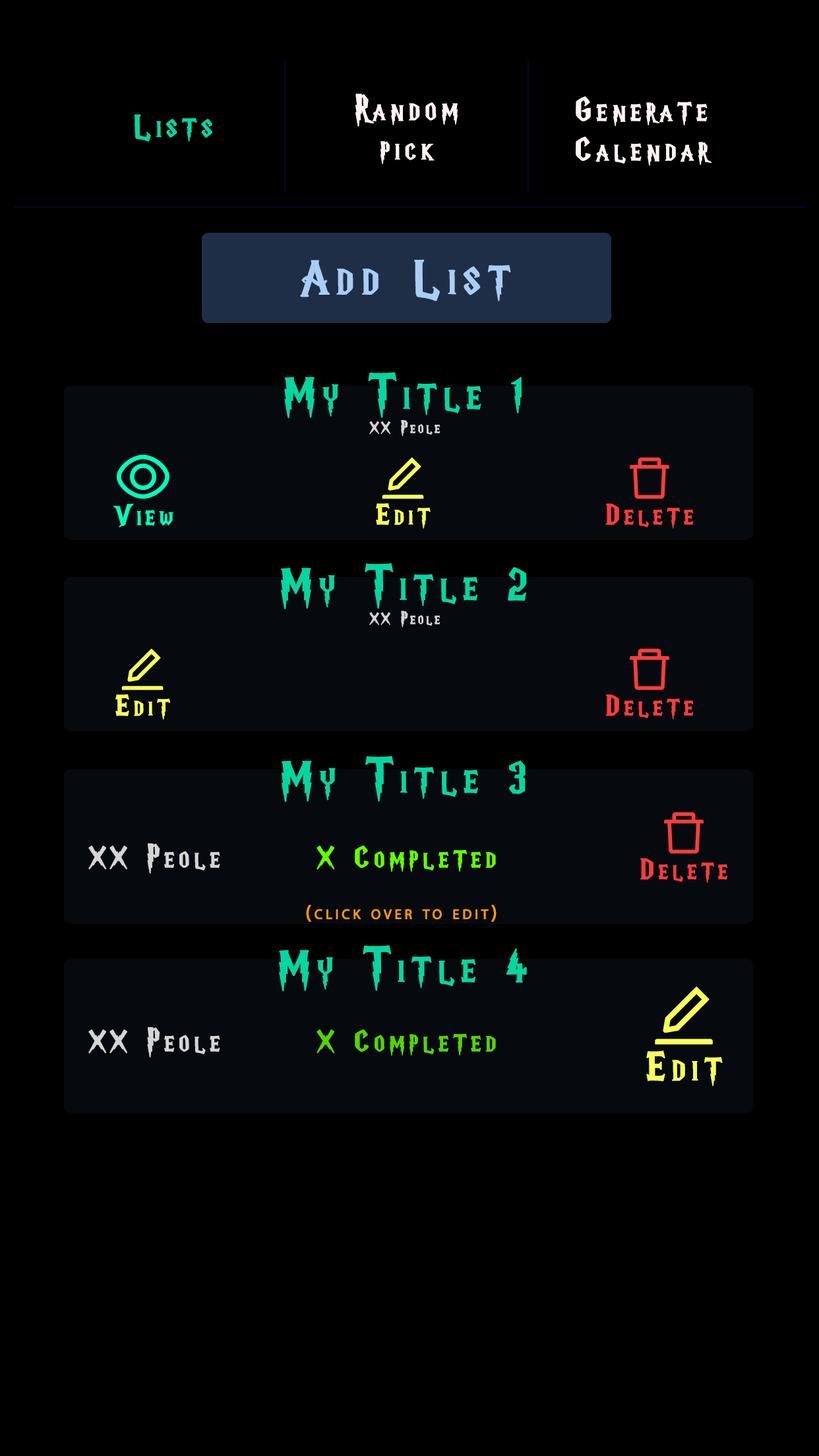
<style>
.page{position:relative;width:819px;height:1456px;background:#000000}
.page>*{position:absolute;margin:0}
.t1{font:33px "HarryP";letter-spacing:0.14em;color:#fff3f3;font-variant:small-caps;font-weight:bold}
.t2{font:33px "HarryP";letter-spacing:0.14em;color:#06d6a0;font-variant:small-caps;font-weight:bold}
.t3{font:50.8px "HarryP";letter-spacing:0.14em;color:#a9cdf5;font-variant:small-caps;font-weight:bold}
.t4{font:44.7px "HarryP";letter-spacing:0.14em;color:#06d6a0;font-variant:small-caps;font-weight:bold}
.t5{font:16.3px "HarryP";letter-spacing:0.14em;color:#d5d5d5;font-variant:small-caps;font-weight:bold}
.t6{font:29px "HarryP";letter-spacing:0.14em;color:#00ffbd;font-variant:small-caps;font-weight:bold}
.t7{font:29px "HarryP";letter-spacing:0.14em;color:#f7ff58;font-variant:small-caps;font-weight:bold}
.t8{font:29px "HarryP";letter-spacing:0.14em;color:#fa3d3d;font-variant:small-caps;font-weight:bold}
.t9{font:30.4px "HarryP";letter-spacing:0.14em;color:#d5d5d5;font-variant:small-caps;font-weight:bold}
.t10{font:30.4px "HarryP";letter-spacing:0.14em;color:#66ff00;font-variant:small-caps;font-weight:bold}
.t11{font:28.9px "HarryP";letter-spacing:0.14em;color:#fa3d3d;font-variant:small-caps;font-weight:bold}
.t12{font:19.8px "MyriadPro-Regular";letter-spacing:0.14em;color:#ff9c00;font-variant:small-caps;font-weight:bold}
.t13{font:30.4px "HarryP";letter-spacing:0.14em;color:#54d502;font-variant:small-caps;font-weight:bold}
.t14{font:40.5px "HarryP";letter-spacing:0.14em;color:#f7ff58;font-variant:small-caps;font-weight:bold}
</style>
<div class="page">
<p class="t1" style="left:355px;top:94px;width:103px;height:70px;text-align:center">Random<br>pick</p>
<p class="t1" style="left:576px;top:96px;width:136px;height:70px;text-align:center">Generate<br>Calendar</p>
<p class="t2" style="left:134px;top:114px;width:78px;height:28px">Lists</p>
<p class="t3" style="left:300px;top:259px;width:211px;height:42px">Add List</p>
<p class="t4" style="left:284px;top:372px;width:238px;height:46px">My Title 1</p>
<p class="t5" style="left:369px;top:420px;width:71px;height:17px">XX Peole</p>
<p class="t6" style="left:113px;top:503px;width:60px;height:25px">View</p>
<p class="t7" style="left:376px;top:503px;width:55px;height:26px">Edit</p>
<p class="t8" style="left:605px;top:503px;width:89px;height:26px">Delete</p>
<p class="t4" style="left:281px;top:563px;width:246px;height:46px">My Title 2</p>
<p class="t5" style="left:369px;top:611px;width:71px;height:17px">XX Peole</p>
<p class="t7" style="left:115px;top:694px;width:55px;height:25px">Edit</p>
<p class="t8" style="left:605px;top:694px;width:89px;height:25px">Delete</p>
<p class="t4" style="left:282px;top:756px;width:244px;height:46px">My Title 3</p>
<p class="t9" style="left:88px;top:843px;width:132px;height:31px">XX Peole</p>
<p class="t10" style="left:317px;top:845px;width:179px;height:27px">X Completed</p>
<p class="t11" style="left:640px;top:858px;width:87px;height:25px">Delete</p>
<p class="t12" style="left:306px;top:905px;width:191px;height:17px">(click over to edit)</p>
<p class="t4" style="left:279px;top:945px;width:248px;height:46px">My Title 4</p>
<p class="t9" style="left:88px;top:1027px;width:132px;height:31px">XX Peole</p>
<p class="t13" style="left:317px;top:1029px;width:179px;height:27px">X Completed</p>
<p class="t14" style="left:646px;top:1050px;width:77px;height:36px">Edit</p>
</div>
